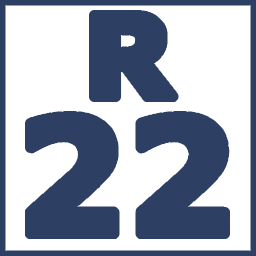
<style>
.page{position:relative;width:256px;height:256px;background:#ffffff}
.page>*{position:absolute;margin:0}
.t1{font:112.6px "Verdana-Bold";color:#2e3f64}
.t2{font:158.6px "Verdana-Bold";color:#2e3f64}
</style>
<div class="page">
<p class="t1" style="left:94px;top:15px;width:80px;height:82px">R</p>
<p class="t2" style="left:30px;top:116px;width:195px;height:118px">22</p>
</div>
